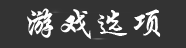
<style>
.page{position:relative;width:186px;height:48px;background:#333333}
.page>*{position:absolute;margin:0}
.t1{font:36px "STXingkai";color:#ffffff}
</style>
<div class="page">
<p class="t1" style="left:27px;top:8px;width:134px;height:31px">游戏选项</p>
</div>
